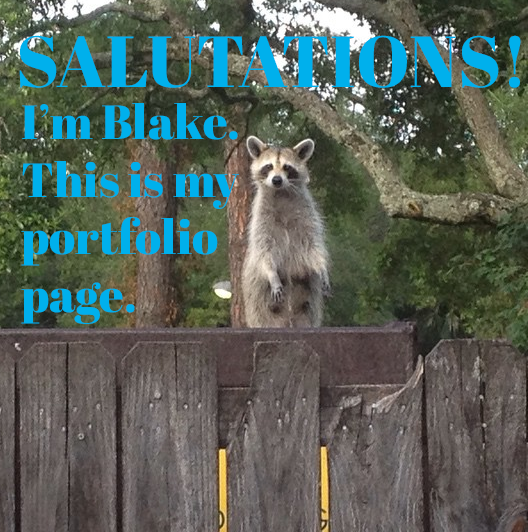
<style>
.page{position:relative;width:528px;height:532px}
.page>*{position:absolute;margin:0}
.t1{font:72px "AbrilFatface-Regular";color:#00b0ec}
.t2{font:48px "AbrilFatface-Regular";color:#00b0ec}
</style>
<div class="page">
<p class="t1" style="left:19px;top:35px;width:502px;height:53px">!SALUTATIONS</p>
<p class="t2" style="left:21px;top:103px;width:218px;height:221px">I’m Blake. This is my portfolio page.</p>
</div>
